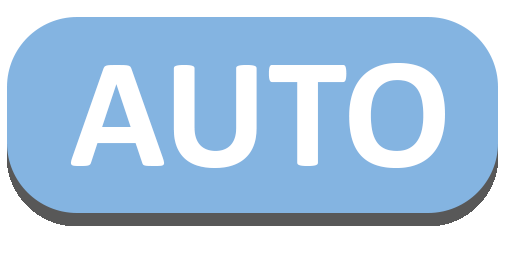
<style>
.page{position:relative;width:512px;height:268px;background:#84b4e1}
.page>*{position:absolute;margin:0}
.t1{font:160px "Calibri-Bold";color:#ffffff}
</style>
<div class="page">
<p class="t1" style="left:70px;top:63px;width:375px;height:105px">AUTO</p>
</div>
